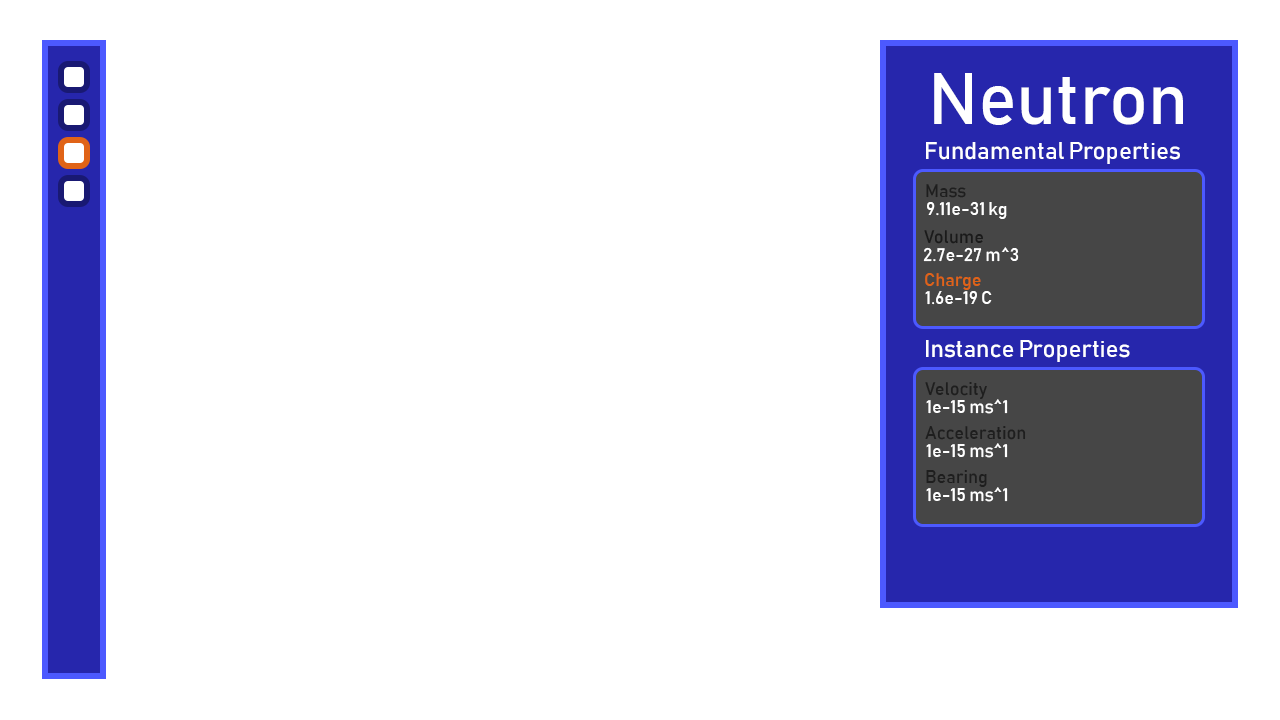
<style>
.page{position:relative;width:1280px;height:720px;background:#ffffff}
.page>*{position:absolute;margin:0}
.t1{font:72px "Bahnschrift";color:#ffffff}
.t2{font:24px "Bahnschrift";color:#ffffff}
.t3{font:18px "Bahnschrift";color:#1e1e1e}
.t4{font:18px "Bahnschrift";color:#ffffff}
.t5{font:18px "Bahnschrift";color:#1a1a1a}
.t6{font:18px "Bahnschrift";color:#e06317}
</style>
<div class="page">
<p class="t1" style="left:934px;top:73px;width:249px;height:52px">Neutron</p>
<p class="t2" style="left:926px;top:142px;width:254px;height:22px">Fundamental Properties</p>
<p class="t3" style="left:926px;top:184px;width:40px;height:14px">Mass</p>
<p class="t4" style="left:927px;top:202px;width:80px;height:17px">9.11e-31 kg</p>
<p class="t5" style="left:924px;top:230px;width:59px;height:14px">Volume</p>
<p class="t4" style="left:923px;top:247px;width:96px;height:15px">2.7e-27 m^3</p>
<p class="t6" style="left:925px;top:273px;width:56px;height:17px">Charge</p>
<p class="t4" style="left:925px;top:291px;width:67px;height:14px">1.6e-19 C</p>
<p class="t2" style="left:926px;top:340px;width:204px;height:22px">Instance Properties</p>
<p class="t3" style="left:925px;top:382px;width:62px;height:17px">Velocity</p>
<p class="t4" style="left:926px;top:399px;width:82px;height:15px">1e-15 ms^1</p>
<p class="t3" style="left:925px;top:426px;width:101px;height:14px">Acceleration</p>
<p class="t4" style="left:926px;top:443px;width:82px;height:15px">1e-15 ms^1</p>
<p class="t3" style="left:926px;top:470px;width:61px;height:17px">Bearing</p>
<p class="t4" style="left:926px;top:487px;width:82px;height:15px">1e-15 ms^1</p>
</div>
